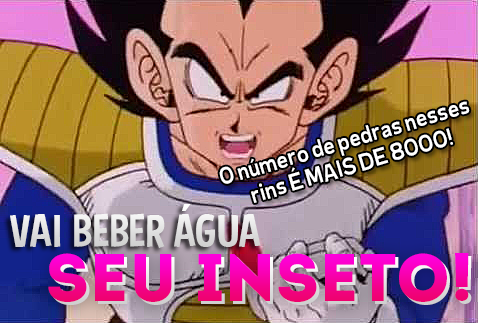
<style>
.page{position:relative;width:478px;height:323px}
.page>*{position:absolute;margin:0}
.t1{font:21.3px "BurbinCasualNC";color:#ffffff}
.t2{font:46.4px "CurseCasualRegular";color:#e1e1e1}
.t3{font:66.7px "Intro"}
</style>
<div class="page">
<p class="t1" style="left:219px;top:101px;width:251px;height:102px;text-align:center;rotate:-16deg">O número de pedras nesses<br>rins É MAIS DE 8000!</p>
<p class="t2" style="left:10px;top:204px;width:251px;height:44px">VAI BEBER ÁGUA</p>
<p class="t3" style="left:48px;top:253px;width:421px;height:49px">SEU INSETO!</p>
<p class="t3" style="left:51px;top:256px;width:421px;height:49px">SEU INSETO!</p>
</div>
